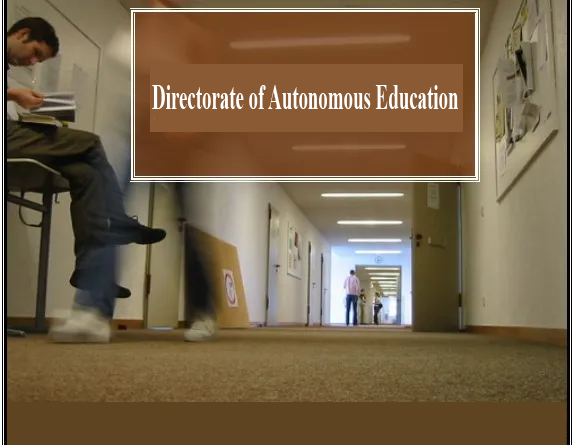
<style>
.page{position:relative;width:574px;height:445px}
.page>*{position:absolute;margin:0}
.t1{font:34.7px "TimesNewRomanPS-BoldMT";color:#ffffff;scale:0.54 1}
</style>
<div class="page">
<p class="t1" style="left:152px;top:85px;width:306px;height:24px">Directorate of Autonomous Education</p>
</div>
